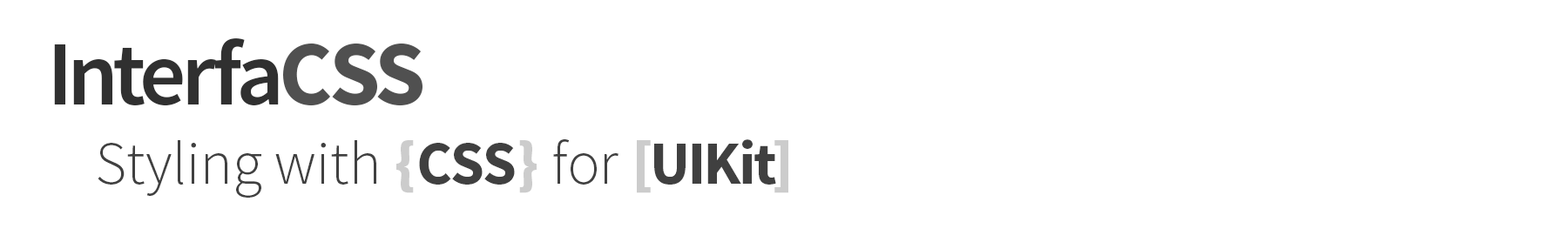
<style>
.page{position:relative;width:1568px;height:249px;background:#ffffff}
.page>*{position:absolute;margin:0}
.t1{font:91.8px "SourceSansPro-Semibold";letter-spacing:-0.04em;color:#303030}
.t2{font:91.8px "SourceSansPro-Bold";letter-spacing:-0.04em;color:#505050}
.t3{font:61px "SourceSansPro-Light";color:#404040}
.t4{font:61px "SourceSansPro-Black";color:#cccccc}
.t5{font:61px "SourceSansPro-Bold";color:#404040}
.t6{font:61px "SourceSansPro-Black";letter-spacing:-0.025em;color:#cccccc}
.t7{font:61px "SourceSansPro-Bold";letter-spacing:-0.025em;color:#404040}
</style>
<div class="page">
<p class="t1" style="left:54px;top:38px;width:368px;height:68px">Interfa<span class="t2">CSS</span></p>
<p class="t3" style="left:98px;top:139px;width:690px;height:59px">Styling with <span class="t4">{</span><span class="t5">CSS</span><span class="t4">} </span>for <span class="t6">[</span><span class="t7">UIKit</span><span class="t4">]</span></p>
</div>
